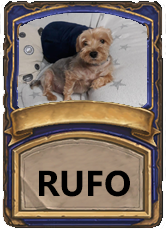
<style>
.page{position:relative;width:166px;height:229px}
.page>*{position:absolute;margin:0}
.t1{font:36px "MicrosoftTaiLe-Bold";color:#000000}
</style>
<div class="page">
<p class="t1" style="left:39px;top:170px;width:91px;height:27px">RUFO</p>
</div>
